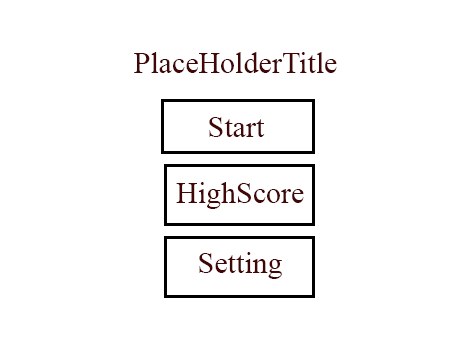
<style>
.page{position:relative;width:454px;height:340px;background:#ffffff}
.page>*{position:absolute;margin:0}
.t1{font:30px "TimesNewRomanPSMT";color:#430606}
</style>
<div class="page">
<p class="t1" style="left:134px;top:52px;width:203px;height:21px">PlaceHolderTitle</p>
<p class="t1" style="left:209px;top:117px;width:56px;height:20px">Start</p>
<p class="t1" style="left:176px;top:182px;width:128px;height:27px">HighScore</p>
<p class="t1" style="left:199px;top:252px;width:83px;height:27px">Setting</p>
</div>
